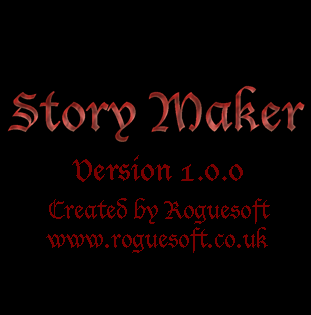
<style>
.page{position:relative;width:311px;height:315px;background:#000000}
.page>*{position:absolute;margin:0}
.t1{font:30px "LucidaBlackletter";color:#7a0000}
.t2{font:24px "LucidaBlackletter";color:#7a0000}
</style>
<div class="page">
<p class="t1" style="left:72px;top:155px;width:171px;height:27px">Version 1.0.0</p>
<p class="t2" style="left:46px;top:198px;width:224px;height:55px;text-align:center">Created by Roguesoft<br>www.roguesoft.co.uk</p>
</div>
